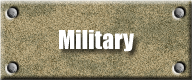
<style>
.page{position:relative;width:192px;height:80px}
.page>*{position:absolute;margin:0}
.t1{font:24px "Impact";color:#ffffff}
</style>
<div class="page">
<p class="t1" style="left:59px;top:30px;width:75px;height:22px">Military</p>
</div>
